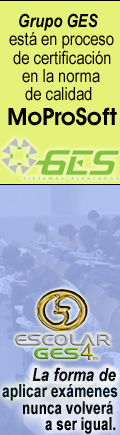
<style>
.page{position:relative;width:120px;height:435px;background:#e5f279}
.page>*{position:absolute;margin:0}
.t1{font:18px "ArialNarrow-BoldItalic";color:#000000}
.t2{font:18px "ArialNarrow";color:#000000}
.t3{font:24px "AvantGardeITCbyBT-Demi";color:#000000}
.t4{font:18px "ArialNarrow-Bold";color:#011331;scale:0.94 1}
.t5{font:18px "ArialNarrow-Bold";color:#000000;scale:0.92 1}
</style>
<div class="page">
<p class="t1" style="left:19px;top:13px;width:79px;height:18px">Grupo GES</p>
<p class="t2" style="left:9px;top:32px;width:105px;height:17px">está en proceso</p>
<p class="t2" style="left:13px;top:50px;width:98px;height:15px">de certificación</p>
<p class="t2" style="left:22px;top:69px;width:78px;height:14px">en la norma</p>
<p class="t2" style="left:25px;top:87px;width:67px;height:14px">de calidad</p>
<p class="t3" style="left:8px;top:107px;width:109px;height:19px">MoProSoft</p>
<p class="t1" style="left:32px;top:367px;width:84px;height:15px">La forma de</p>
<p class="t4" style="left:2px;top:384px;width:116px;height:17px">aplicar exámenes</p>
<p class="t5" style="left:23px;top:401px;width:90px;height:14px">nunca volverá</p>
<p class="t5" style="left:45px;top:417px;width:71px;height:17px">a ser igual.</p>
</div>
